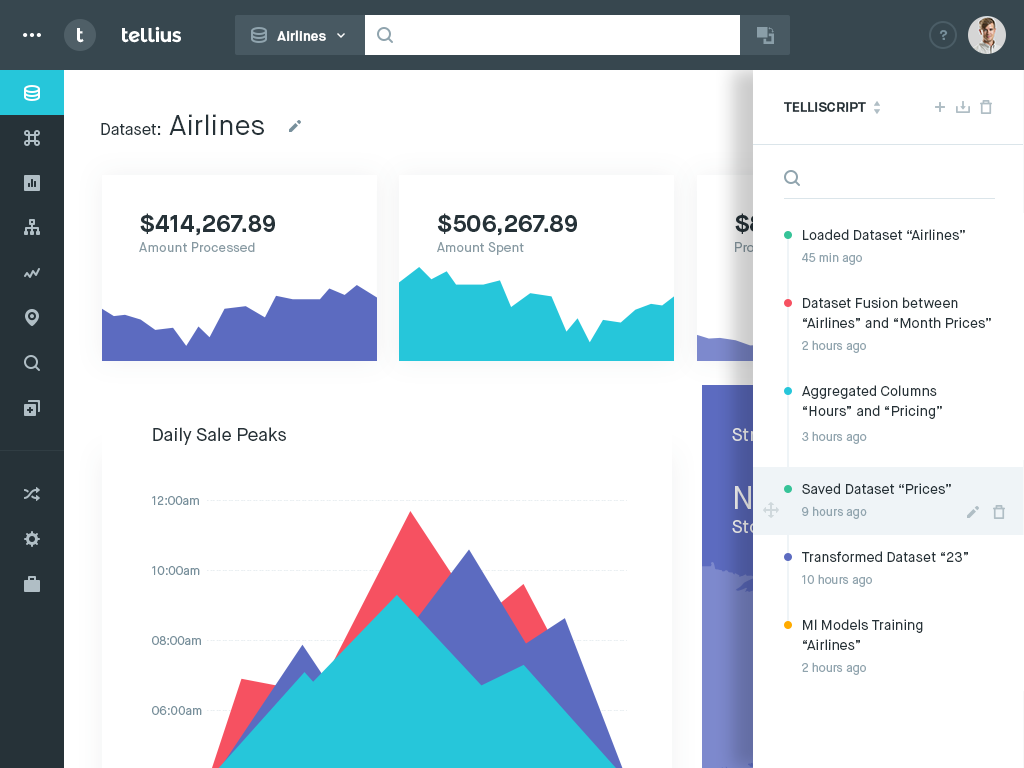
<style>
.page{position:relative;width:1024px;height:768px;background:#ffffff}
.page>*{position:absolute;margin:0}
.t1{font:20px "MontserratAlternates-Bold";letter-spacing:-0.04em;color:#ffffff}
.t2{font:14px "MaisonNeue-Bold";color:#ffffff}
.t3{font:14px "MaisonNeue-Bold";color:#78909c}
.t4{font:14px "MaisonNeue-Bold";color:#263238;text-transform:uppercase}
.t5{font:16px "MaisonNeue-Book";color:#263238}
.t6{font:28px "MaisonNeue-Book";color:#263238}
.t7{font:24px "MaisonNeue-Bold";color:#263238;text-transform:uppercase}
.t8{font:14px "MaisonNeue-Book";color:#263238}
.t9{font:13px "MaisonNeue-Book";letter-spacing:0.01em;color:#8799a2}
.t10{font:12px "MaisonNeue-Book";color:#90a4ae}
.t11{font:14px/19.5px "MaisonNeue-Book";color:#263238}
.t12{font:18px "MaisonNeue-Book";color:#263238}
.t13{font:12px "MaisonNeue-Book";color:#78909c}
</style>
<div class="page">
<p class="t1" style="left:77px;top:28px;width:7px;height:15px">t</p>
<p class="t1" style="left:122px;top:26px;width:59px;height:17px">tellius</p>
<p class="t2" style="left:277px;top:30px;width:49px;height:11px">Airlines</p>
<p class="t3" style="left:939px;top:30px;width:9px;height:10px">?</p>
<p class="t4" style="left:784px;top:102px;width:82px;height:10px">TelliScript</p>
<p class="t5" style="left:101px;top:114px;width:163px;height:21px">Dataset:<span class="t6"> Airlines</span></p>
<p class="t7" style="left:140px;top:213px;width:135px;height:23px">$414,267.89</p>
<p class="t7" style="left:437px;top:213px;width:140px;height:23px">$506,267.89</p>
<p class="t8" style="left:803px;top:229px;width:162px;height:11px">Loaded Dataset “Airlines”</p>
<p class="t9" style="left:139px;top:242px;width:116px;height:10px">Amount Processed</p>
<p class="t9" style="left:437px;top:242px;width:87px;height:13px">Amount Spent</p>
<p class="t10" style="left:802px;top:253px;width:60px;height:12px">45 min ago</p>
<p class="t11" style="left:803px;top:297px;width:188px;height:31px">Dataset Fusion between<br>“Airlines” and “Month Prices”</p>
<p class="t10" style="left:802px;top:340px;width:64px;height:13px">2 hours ago</p>
<p class="t11" style="left:802px;top:385px;width:140px;height:34px">Aggregated Columns <br>“Hours” and “Pricing”</p>
<p class="t12" style="left:153px;top:427px;width:133px;height:18px">Daily Sale Peaks</p>
<p class="t10" style="left:802px;top:431px;width:65px;height:13px">3 hours ago</p>
<p class="t8" style="left:802px;top:483px;width:149px;height:11px">Saved Dataset “Prices”</p>
<p class="t13" style="left:152px;top:496px;width:47px;height:9px">12:00am</p>
<p class="t10" style="left:802px;top:506px;width:65px;height:13px">9 hours ago</p>
<p class="t8" style="left:802px;top:551px;width:166px;height:11px">Transformed Dataset “23”</p>
<p class="t13" style="left:152px;top:566px;width:48px;height:9px">10:00am</p>
<p class="t10" style="left:802px;top:574px;width:70px;height:13px">10 hours ago</p>
<p class="t11" style="left:803px;top:619px;width:120px;height:31px">Ml Models Training<br>“Airlines”</p>
<p class="t13" style="left:152px;top:636px;width:49px;height:9px">08:00am</p>
<p class="t10" style="left:802px;top:662px;width:64px;height:13px">2 hours ago</p>
<p class="t13" style="left:152px;top:706px;width:50px;height:9px">06:00am</p>
</div>
